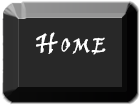
<style>
.page{position:relative;width:140px;height:105px;background:#282828}
.page>*{position:absolute;margin:0}
.t1{font:48px "VinerHandITC";letter-spacing:0.1em;color:#ffffff;font-variant:small-caps}
</style>
<div class="page">
<p class="t1" style="left:36px;top:32px;width:70px;height:23px">Home</p>
</div>
